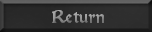
<style>
.page{position:relative;width:152px;height:32px}
.page>*{position:absolute;margin:0}
.t1{font:20px "MorrisRomanAlternate-Black";color:#919191}
</style>
<div class="page">
<p class="t1" style="left:52px;top:10px;width:52px;height:13px">Return</p>
</div>
